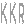
<style>
.page{position:relative;width:25px;height:25px;background:#ffffff}
.page>*{position:absolute;margin:0}
.t1{font:44px "TYPOGRAPHPRO-SemiBold";letter-spacing:0.075em;color:#9b9b9b;scale:0.36 1}
</style>
<div class="page">
<p class="t1" style="left:1px;top:2px;width:23px;height:22px">KKR</p>
</div>
